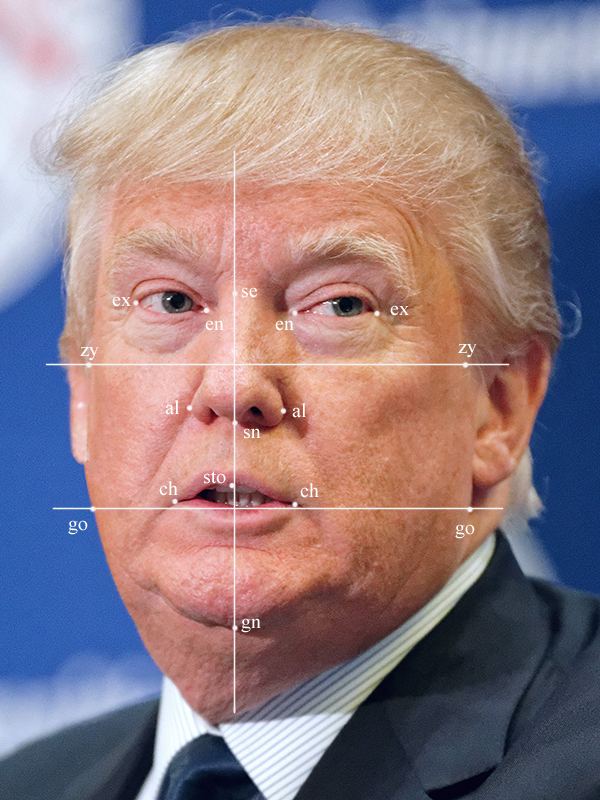
<style>
.page{position:relative;width:600px;height:800px}
.page>*{position:absolute;margin:0}
.t1{font:20px "TimesNewRomanPSMT";color:#ffffff}
</style>
<div class="page">
<p class="t1" style="left:242px;top:287px;width:15px;height:11px">se</p>
<p class="t1" style="left:112px;top:296px;width:19px;height:11px">ex</p>
<p class="t1" style="left:390px;top:305px;width:19px;height:11px">ex</p>
<p class="t1" style="left:205px;top:320px;width:19px;height:11px">en</p>
<p class="t1" style="left:275px;top:320px;width:19px;height:11px">en</p>
<p class="t1" style="left:80px;top:347px;width:19px;height:14px">zy</p>
<p class="t1" style="left:458px;top:344px;width:19px;height:14px">zy</p>
<p class="t1" style="left:165px;top:400px;width:14px;height:15px">al</p>
<p class="t1" style="left:292px;top:403px;width:14px;height:15px">al</p>
<p class="t1" style="left:244px;top:428px;width:17px;height:11px">sn</p>
<p class="t1" style="left:204px;top:471px;width:22px;height:13px">sto</p>
<p class="t1" style="left:159px;top:481px;width:19px;height:15px">ch</p>
<p class="t1" style="left:300px;top:483px;width:19px;height:15px">ch</p>
<p class="t1" style="left:68px;top:520px;width:20px;height:15px">go</p>
<p class="t1" style="left:455px;top:524px;width:20px;height:15px">go</p>
<p class="t1" style="left:241px;top:618px;width:20px;height:15px">gn</p>
</div>
